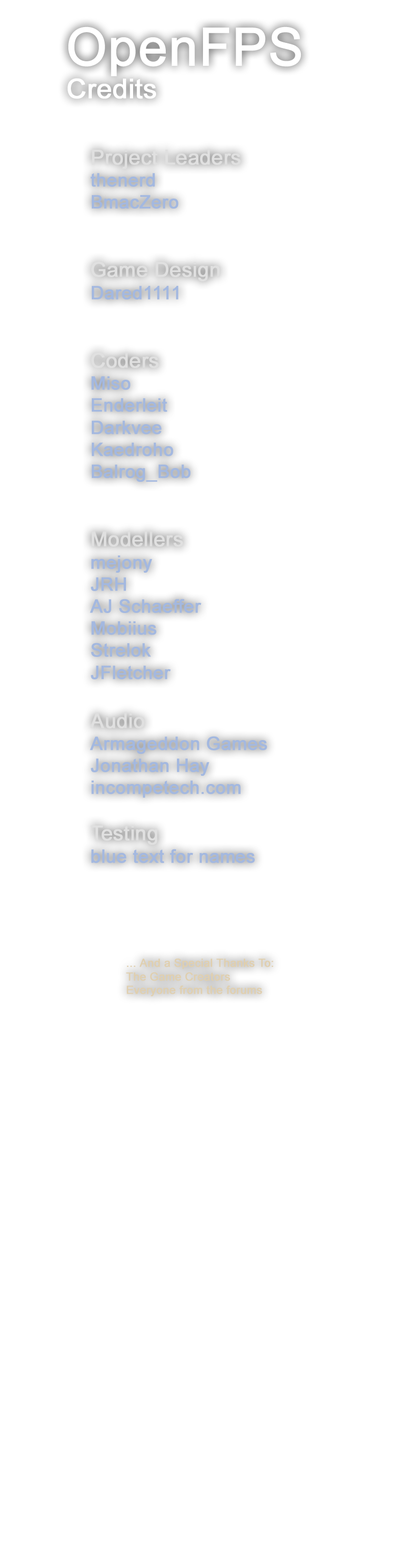
<style>
.page{position:relative;width:408px;height:1568px;background:#ffffff}
.page>*{position:absolute;margin:0}
.t1{font:52.1px "ArialMT";color:#ffffff;font-weight:bold}
.t2{font:27.1px "ArialMT";color:#ffffff;font-weight:bold}
.t3{font:18.4px "ArialMT";color:#a3b8e0;font-weight:bold}
.t4{font:20.4px "ArialMT";color:#e0e0e0;font-weight:bold}
.t5{font:11.2px "ArialMT";color:#e0cfae;font-weight:bold}
</style>
<div class="page">
<p class="t1" style="left:67px;top:27px;width:235px;height:72px">OpenFPS<br><span class="t2">Credits</span></p>
<p class="t3" style="left:90px;top:150px;width:177px;height:713px"><span class="t4">Project Leaders<br></span>thenerd<br>BmacZero<br><br><br><span class="t4">Game Design<br></span>Dared1111<br><br><br><span class="t4">Coders<br></span>Miso<br>Enderleit<br>Darkvee<br>Kaedroho<br>Balrog_Bob<br><br><br><span class="t4">Modellers<br></span>mejony<br>JRH<br>AJ Schaeffer<br>Mobiius<br>Strelok<br>JFletcher<br><span class="t4"><br>Audio<br></span>Armageddon Games<br>Jonathan Hay<br>incompetech.com<br><br><span class="t4">Testing<br></span>blue text for names</p>
<p class="t5" style="left:126px;top:959px;width:148px;height:37px"><span class="t3"><br></span>... And a Special Thanks To:<br>The Game Creators<br>Everyone from the forums</p>
</div>
